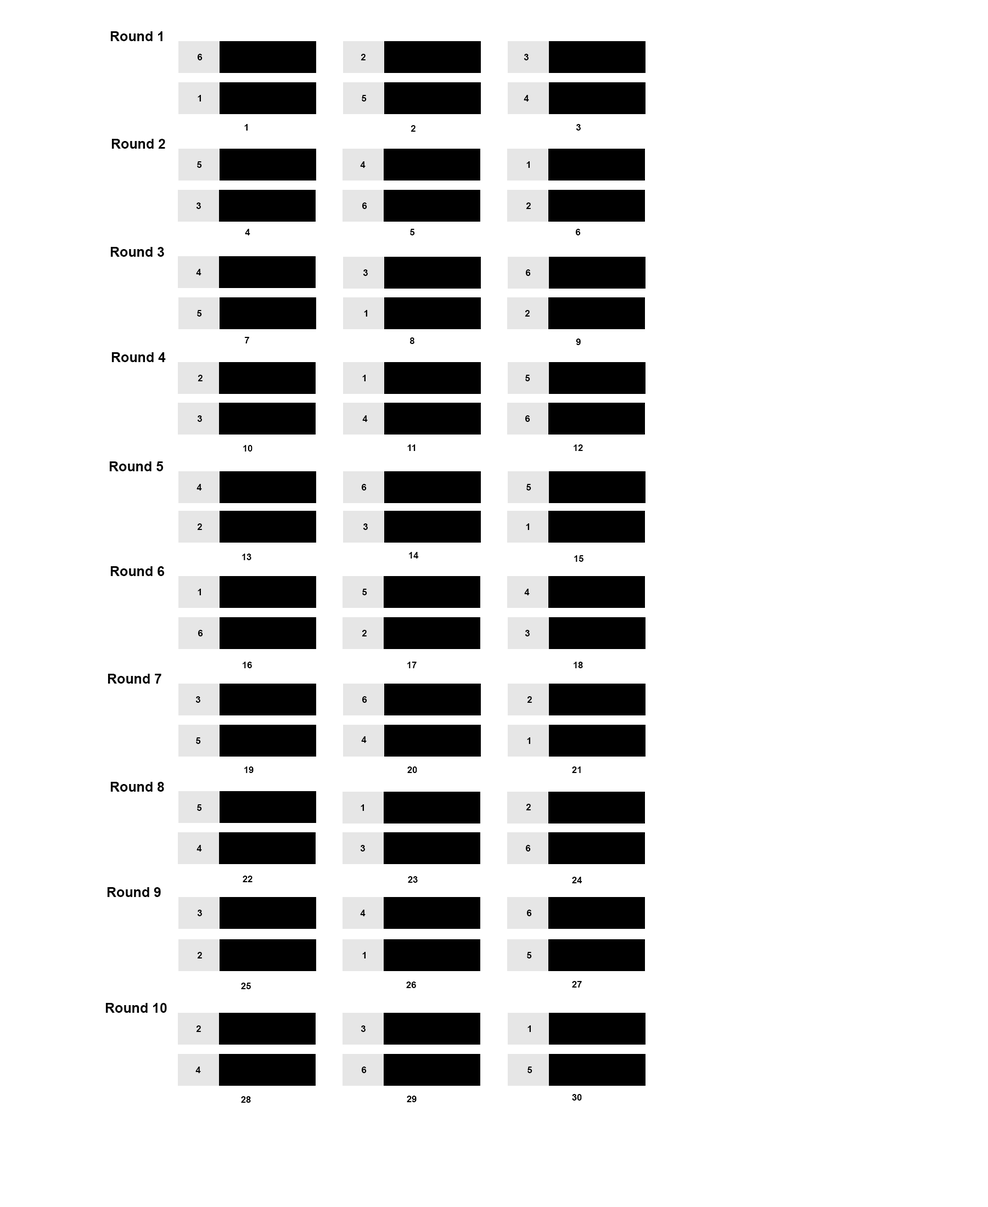
<style>
.page{position:relative;width:988px;height:1207px;background:#ffffff}
.page>*{position:absolute;margin:0}
.t1{font:13.7px "Arial-BoldMT";color:#000000}
.t2{font:9.1px "Arial-BoldMT";color:#000000}
</style>
<div class="page">
<p class="t1" style="left:110px;top:31px;width:52px;height:10px">Round 1</p>
<p class="t2" style="left:198px;top:54px;width:4px;height:6px">6</p>
<p class="t2" style="left:361px;top:54px;width:4px;height:6px">2</p>
<p class="t2" style="left:524px;top:54px;width:4px;height:6px">3</p>
<p class="t2" style="left:198px;top:95px;width:3px;height:7px">1</p>
<p class="t2" style="left:362px;top:95px;width:5px;height:7px">5</p>
<p class="t2" style="left:524px;top:95px;width:5px;height:7px">4</p>
<p class="t2" style="left:244px;top:124px;width:3px;height:7px">1</p>
<p class="t2" style="left:410px;top:125px;width:5px;height:7px">2</p>
<p class="t2" style="left:576px;top:124px;width:5px;height:7px">3</p>
<p class="t1" style="left:111px;top:139px;width:54px;height:10px">Round 2</p>
<p class="t2" style="left:197px;top:161px;width:5px;height:7px">5</p>
<p class="t2" style="left:360px;top:161px;width:5px;height:7px">4</p>
<p class="t2" style="left:526px;top:161px;width:4px;height:7px">1</p>
<p class="t2" style="left:196px;top:202px;width:5px;height:7px">3</p>
<p class="t2" style="left:362px;top:202px;width:5px;height:7px">6</p>
<p class="t2" style="left:526px;top:202px;width:5px;height:7px">2</p>
<p class="t2" style="left:245px;top:229px;width:5px;height:6px">4</p>
<p class="t2" style="left:410px;top:229px;width:5px;height:6px">5</p>
<p class="t2" style="left:576px;top:229px;width:5px;height:6px">6</p>
<p class="t1" style="left:110px;top:247px;width:54px;height:10px">Round 3</p>
<p class="t2" style="left:196px;top:269px;width:5px;height:6px">4</p>
<p class="t2" style="left:363px;top:269px;width:5px;height:7px">3</p>
<p class="t2" style="left:526px;top:269px;width:5px;height:7px">6</p>
<p class="t2" style="left:197px;top:310px;width:5px;height:7px">5</p>
<p class="t2" style="left:364px;top:310px;width:3px;height:7px">1</p>
<p class="t2" style="left:525px;top:310px;width:5px;height:7px">2</p>
<p class="t2" style="left:245px;top:337px;width:4px;height:7px">7</p>
<p class="t2" style="left:409px;top:337px;width:5px;height:7px">8</p>
<p class="t2" style="left:576px;top:339px;width:5px;height:6px">9</p>
<p class="t1" style="left:111px;top:352px;width:55px;height:10px">Round 4</p>
<p class="t2" style="left:198px;top:375px;width:4px;height:6px">2</p>
<p class="t2" style="left:362px;top:375px;width:3px;height:6px">1</p>
<p class="t2" style="left:525px;top:375px;width:5px;height:6px">5</p>
<p class="t2" style="left:197px;top:415px;width:5px;height:7px">3</p>
<p class="t2" style="left:362px;top:415px;width:6px;height:7px">4</p>
<p class="t2" style="left:525px;top:415px;width:5px;height:7px">6</p>
<p class="t2" style="left:243px;top:445px;width:9px;height:7px">10</p>
<p class="t2" style="left:407px;top:444px;width:8px;height:7px">11</p>
<p class="t2" style="left:573px;top:444px;width:10px;height:7px">12</p>
<p class="t1" style="left:109px;top:461px;width:55px;height:10px">Round 5</p>
<p class="t2" style="left:196px;top:484px;width:6px;height:7px">4</p>
<p class="t2" style="left:362px;top:484px;width:5px;height:7px">6</p>
<p class="t2" style="left:526px;top:484px;width:5px;height:7px">5</p>
<p class="t2" style="left:197px;top:524px;width:5px;height:6px">2</p>
<p class="t2" style="left:363px;top:524px;width:5px;height:6px">3</p>
<p class="t2" style="left:526px;top:524px;width:3px;height:6px">1</p>
<p class="t2" style="left:242px;top:554px;width:9px;height:6px">13</p>
<p class="t2" style="left:409px;top:552px;width:10px;height:7px">14</p>
<p class="t2" style="left:574px;top:555px;width:9px;height:7px">15</p>
<p class="t1" style="left:110px;top:566px;width:55px;height:10px">Round 6</p>
<p class="t2" style="left:198px;top:589px;width:3px;height:6px">1</p>
<p class="t2" style="left:362px;top:589px;width:5px;height:6px">5</p>
<p class="t2" style="left:524px;top:589px;width:6px;height:6px">4</p>
<p class="t2" style="left:198px;top:630px;width:5px;height:7px">6</p>
<p class="t2" style="left:362px;top:630px;width:5px;height:7px">2</p>
<p class="t2" style="left:525px;top:630px;width:5px;height:7px">3</p>
<p class="t2" style="left:243px;top:662px;width:9px;height:6px">16</p>
<p class="t2" style="left:407px;top:662px;width:9px;height:6px">17</p>
<p class="t2" style="left:573px;top:662px;width:10px;height:6px">18</p>
<p class="t1" style="left:108px;top:674px;width:53px;height:10px">Round 7</p>
<p class="t2" style="left:195px;top:696px;width:5px;height:7px">3</p>
<p class="t2" style="left:362px;top:696px;width:5px;height:7px">6</p>
<p class="t2" style="left:527px;top:696px;width:5px;height:7px">2</p>
<p class="t2" style="left:196px;top:738px;width:5px;height:6px">5</p>
<p class="t2" style="left:361px;top:736px;width:6px;height:7px">4</p>
<p class="t2" style="left:527px;top:738px;width:3px;height:6px">1</p>
<p class="t2" style="left:244px;top:767px;width:10px;height:6px">19</p>
<p class="t2" style="left:407px;top:767px;width:10px;height:6px">20</p>
<p class="t2" style="left:572px;top:767px;width:9px;height:6px">21</p>
<p class="t1" style="left:110px;top:782px;width:54px;height:10px">Round 8</p>
<p class="t2" style="left:197px;top:804px;width:5px;height:7px">5</p>
<p class="t2" style="left:361px;top:804px;width:3px;height:7px">1</p>
<p class="t2" style="left:526px;top:804px;width:5px;height:6px">2</p>
<p class="t2" style="left:196px;top:845px;width:6px;height:7px">4</p>
<p class="t2" style="left:360px;top:845px;width:5px;height:7px">3</p>
<p class="t2" style="left:526px;top:845px;width:5px;height:7px">6</p>
<p class="t2" style="left:243px;top:876px;width:9px;height:6px">22</p>
<p class="t2" style="left:408px;top:876px;width:10px;height:7px">23</p>
<p class="t2" style="left:572px;top:877px;width:10px;height:6px">24</p>
<p class="t1" style="left:107px;top:887px;width:54px;height:10px">Round 9</p>
<p class="t2" style="left:197px;top:910px;width:5px;height:6px">3</p>
<p class="t2" style="left:360px;top:910px;width:5px;height:6px">4</p>
<p class="t2" style="left:527px;top:910px;width:5px;height:6px">6</p>
<p class="t2" style="left:197px;top:952px;width:5px;height:7px">2</p>
<p class="t2" style="left:362px;top:952px;width:3px;height:7px">1</p>
<p class="t2" style="left:527px;top:952px;width:5px;height:7px">5</p>
<p class="t2" style="left:241px;top:983px;width:10px;height:6px">25</p>
<p class="t2" style="left:406px;top:982px;width:10px;height:6px">26</p>
<p class="t2" style="left:572px;top:981px;width:10px;height:7px">27</p>
<p class="t1" style="left:105px;top:1003px;width:62px;height:10px">Round 10</p>
<p class="t2" style="left:196px;top:1026px;width:5px;height:6px">2</p>
<p class="t2" style="left:361px;top:1026px;width:4px;height:6px">3</p>
<p class="t2" style="left:527px;top:1026px;width:4px;height:6px">1</p>
<p class="t2" style="left:195px;top:1067px;width:6px;height:6px">4</p>
<p class="t2" style="left:362px;top:1067px;width:5px;height:6px">6</p>
<p class="t2" style="left:527px;top:1067px;width:5px;height:6px">5</p>
<p class="t2" style="left:241px;top:1096px;width:10px;height:7px">28</p>
<p class="t2" style="left:407px;top:1096px;width:9px;height:6px">29</p>
<p class="t2" style="left:572px;top:1094px;width:10px;height:7px">30</p>
</div>
